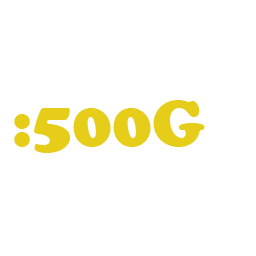
<style>
.page{position:relative;width:256px;height:256px;background:#ffffff}
.page>*{position:absolute;margin:0}
.t1{font:66.7px "CooperBlack";color:#e5cd19}
</style>
<div class="page">
<p class="t1" style="left:14px;top:100px;width:191px;height:53px">:500G</p>
</div>
